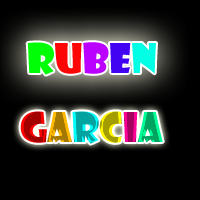
<style>
.page{position:relative;width:200px;height:200px;background:#000000}
.page>*{position:absolute;margin:0}
.t1{font:40px "ShowcardGothic-Reg";color:#00ff06}
.t2{font:40px "ShowcardGothic-Reg";color:#fd0606}
.t3{font:40px "ShowcardGothic-Reg";color:#ba01ff}
.t4{font:40px "ShowcardGothic-Reg";color:#4103f2}
.t5{font:40px "ShowcardGothic-Reg";color:#00ffe4}
.t6{font:40px "ShowcardGothic-Reg"}
</style>
<div class="page">
<p class="t1" style="left:27px;top:42px;width:129px;height:33px">R<span class="t2">U</span><span class="t3">B</span><span class="t4">E</span><span class="t5">N</span></p>
<p class="t6" style="left:20px;top:111px;width:143px;height:33px">GARCIA</p>
</div>
